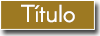
<style>
.page{position:relative;width:100px;height:36px;background:#9d7922}
.page>*{position:absolute;margin:0}
.t1{font:24px "Arcon-Regular";color:#ffffff}
</style>
<div class="page">
<p class="t1" style="left:21px;top:4px;width:54px;height:19px">Título</p>
</div>
